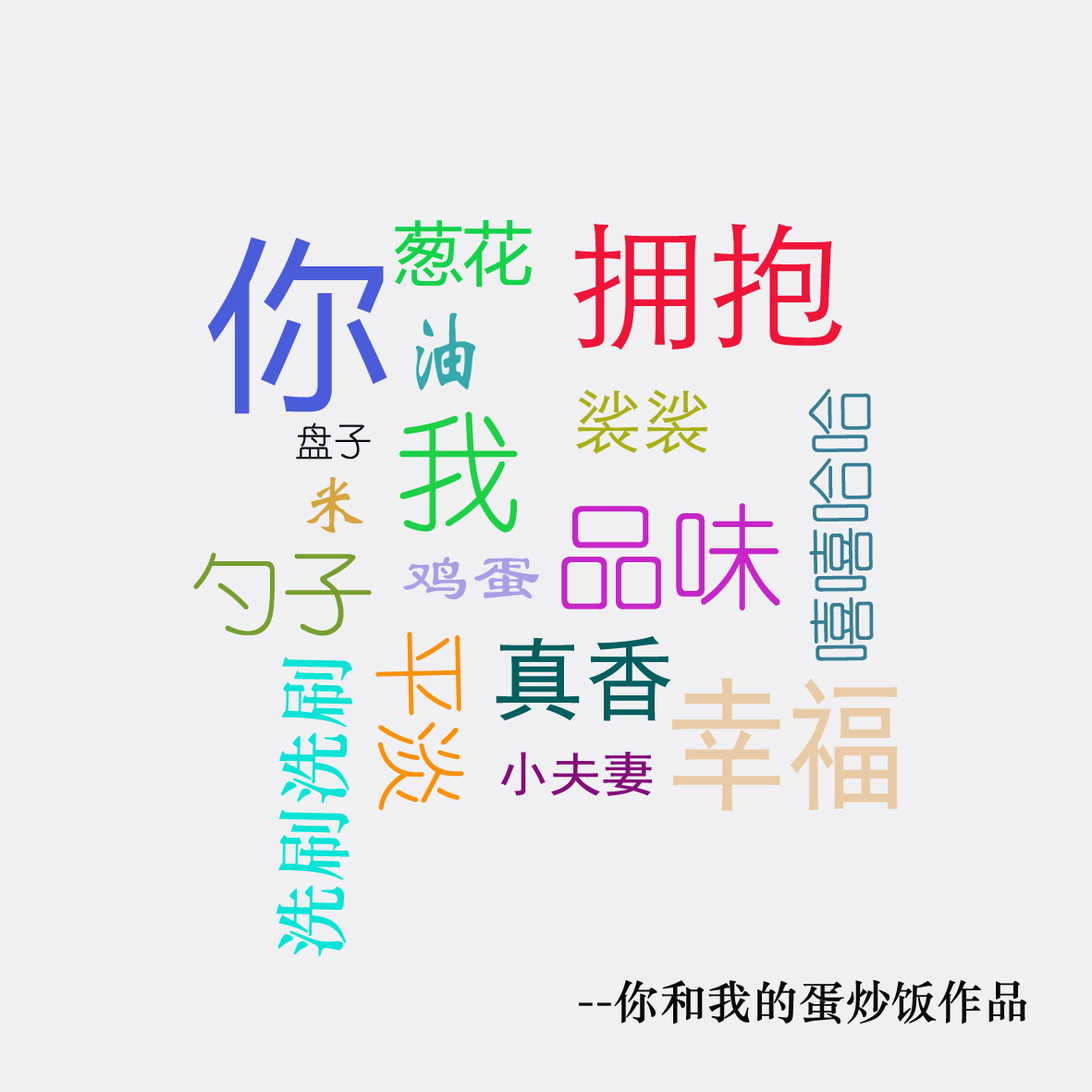
<style>
.page{position:relative;width:1092px;height:1092px;background:#f0f0f2}
.page>*{position:absolute;margin:0}
.t1{font:69.3px "MicrosoftYaHei";color:#15d24a}
.t2{font:138.7px "STXihei";color:#ee1539}
.t3{font:183.3px "MicrosoftYaHei";color:#4b5cda}
.t4{font:107.3px "STXinwei";color:#35a8ac;scale:0.77 1}
.t5{font:69.3px "STXihei";color:#aaaf17}
.t6{font:69.3px "YouYuan";color:#387e95}
.t7{font:128.2px "YouYuan";color:#1ed048}
.t8{font:38.5px "YouYuan";color:#0d070d}
.t9{font:69.3px "STXinwei";color:#d8a440}
.t10{font:115.6px "YouYuan";color:#c626c8}
.t11{font:92.5px "YouYuan";color:#769f2f}
.t12{font:69.3px "LiSu";color:#aa9ee7}
.t13{font:92.5px "YouYuan";color:#f8910b}
.t14{font:92.5px "SimHei";color:#055e5f}
.t15{font:76.4px "STZhongsong";color:#0be3d6}
.t16{font:144.3px "SimHei";color:#e8cba6;scale:0.82 1}
.t17{font:47.8px "SimHei";color:#840d7a;scale:1.09 1}
.t18{font:46.2px "STZhongsong";color:#090909}
</style>
<div class="page">
<p class="t1" style="left:394px;top:220px;width:138px;height:68px">葱花</p>
<p class="t2" style="left:573px;top:223px;width:269px;height:127px">拥抱</p>
<p class="t3" style="left:207px;top:237px;width:180px;height:177px">你</p>
<p class="t4" style="left:415px;top:313px;width:61px;height:78px">油</p>
<p class="t5" style="left:576px;top:389px;width:131px;height:65px">裟裟</p>
<p class="t6" style="left:808px;top:388px;width:66px;height:273px;rotate:-91deg">嘻嘻哈哈</p>
<p class="t7" style="left:399px;top:411px;width:119px;height:122px">我</p>
<p class="t8" style="left:296px;top:423px;width:75px;height:37px">盘子</p>
<p class="t9" style="left:306px;top:476px;width:57px;height:58px">米</p>
<p class="t10" style="left:561px;top:503px;width:219px;height:108px">品味</p>
<p class="t11" style="left:193px;top:552px;width:179px;height:84px">勺子</p>
<p class="t12" style="left:403px;top:557px;width:136px;height:43px">鸡蛋</p>
<p class="t13" style="left:375px;top:632px;width:89px;height:178px;rotate:89deg">平淡</p>
<p class="t14" style="left:496px;top:636px;width:175px;height:85px">真香</p>
<p class="t15" style="left:276px;top:656px;width:76px;height:300px;rotate:-89deg">洗刷洗刷</p>
<p class="t16" style="left:672px;top:678px;width:226px;height:133px">幸福</p>
<p class="t17" style="left:500px;top:752px;width:152px;height:44px">小夫妻</p>
<p class="t18" style="left:579px;top:979px;width:447px;height:45px">--你和我的蛋炒饭作品</p>
</div>
